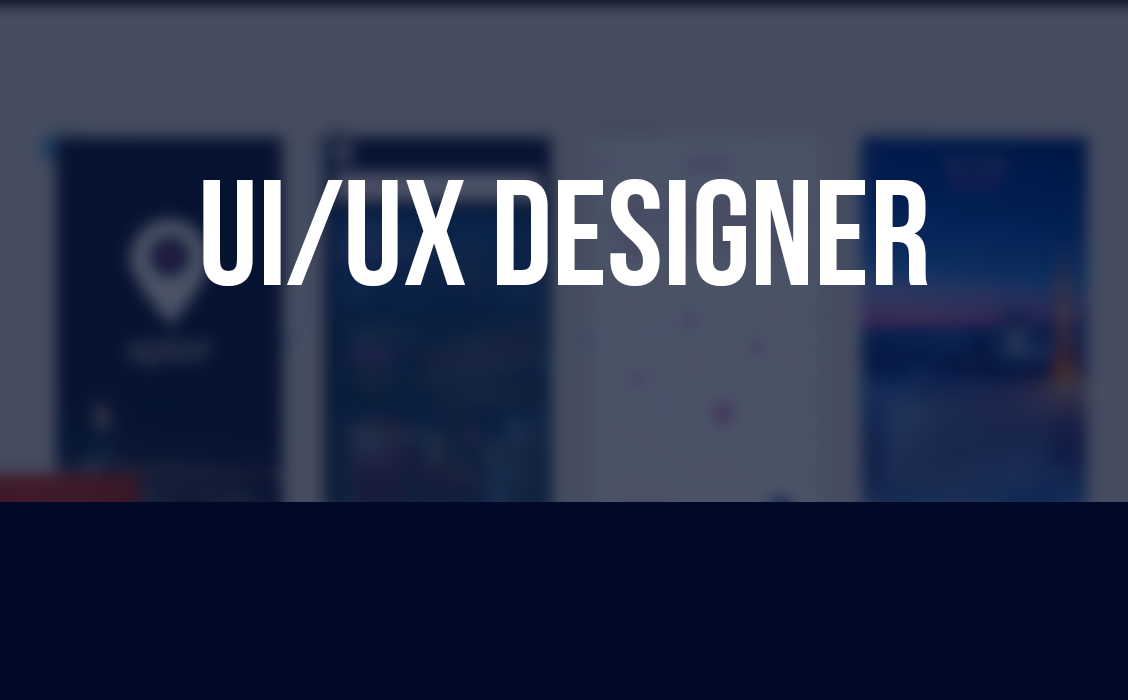
<style>
.page{position:relative;width:1128px;height:700px;background:#000a26}
.page>*{position:absolute;margin:0}
.t1{font:150px "BebasNeue";color:#ffffff}
</style>
<div class="page">
<p class="t1" style="left:203px;top:179px;width:725px;height:107px">UI/UX Designer</p>
</div>
